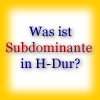
<style>
.page{position:relative;width:100px;height:100px}
.page>*{position:absolute;margin:0}
.t1{font:13.3px "Georgia";color:#b10000}
.t2{font:13.3px "Georgia";color:#000080}
</style>
<div class="page">
<p class="t1" style="left:6px;top:26px;width:86px;height:43px;text-align:center"><span class="t2">Was ist<br></span>Subdominante<span class="t2"> <br>in H-Dur?</span></p>
</div>
